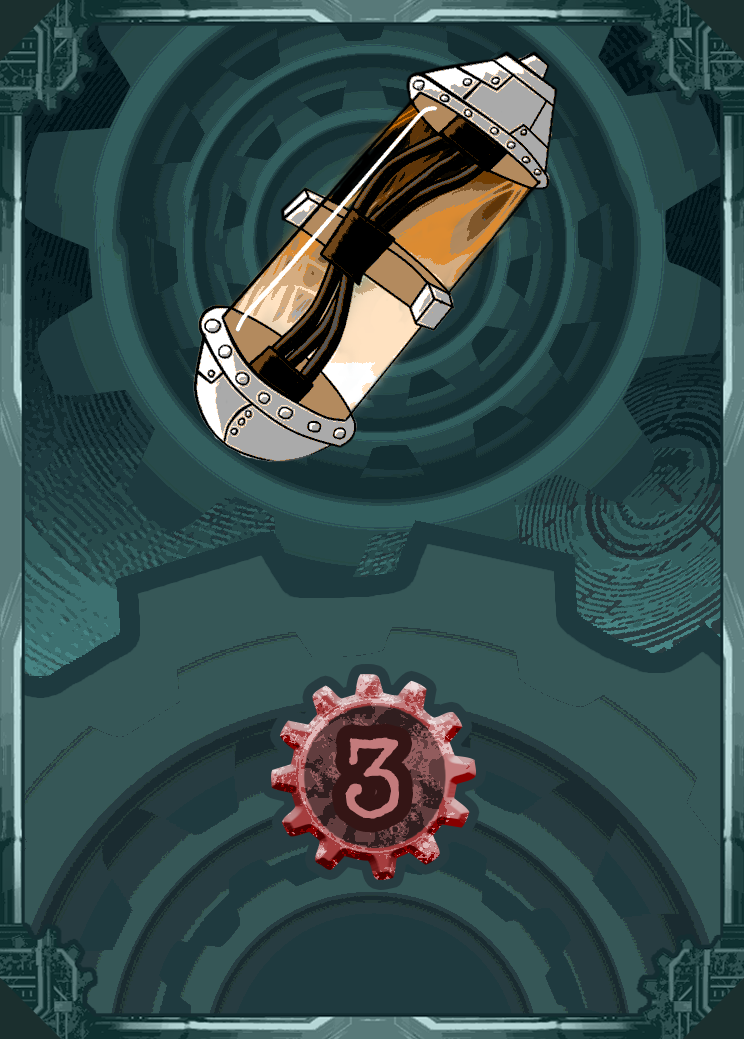
<style>
.page{position:relative;width:744px;height:1039px}
.page>*{position:absolute;margin:0}
.t1{font:121.5px "AmerTypewriterITCbyBT-Medium";color:#c37b7c}
</style>
<div class="page">
<p class="t1" style="left:345px;top:737px;width:54px;height:82px">3</p>
</div>
